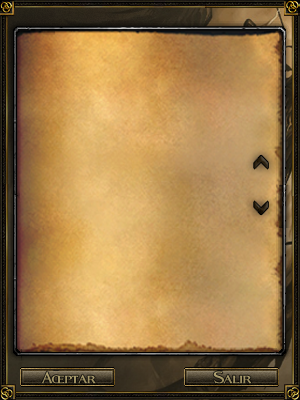
<style>
.page{position:relative;width:300px;height:400px}
.page>*{position:absolute;margin:0}
.t1{font:30px "Fleet-Street";color:#a19466}
.t2{font:30px "Fleet-Street";color:#a29466}
</style>
<div class="page">
<p class="t1" style="left:41px;top:371px;width:55px;height:13px">Aceptar</p>
<p class="t2" style="left:213px;top:371px;width:39px;height:13px">Salir</p>
</div>
